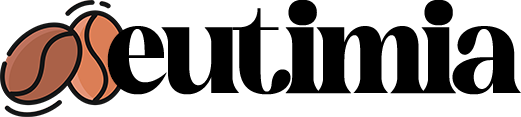
<style>
.page{position:relative;width:521px;height:117px;background:#ffffff}
.page>*{position:absolute;margin:0}
.t1{font:125px "Mogilte";letter-spacing:-0.05em;color:#000000}
</style>
<div class="page">
<p class="t1" style="left:107px;top:0px;width:414px;height:95px">eutimia</p>
</div>
